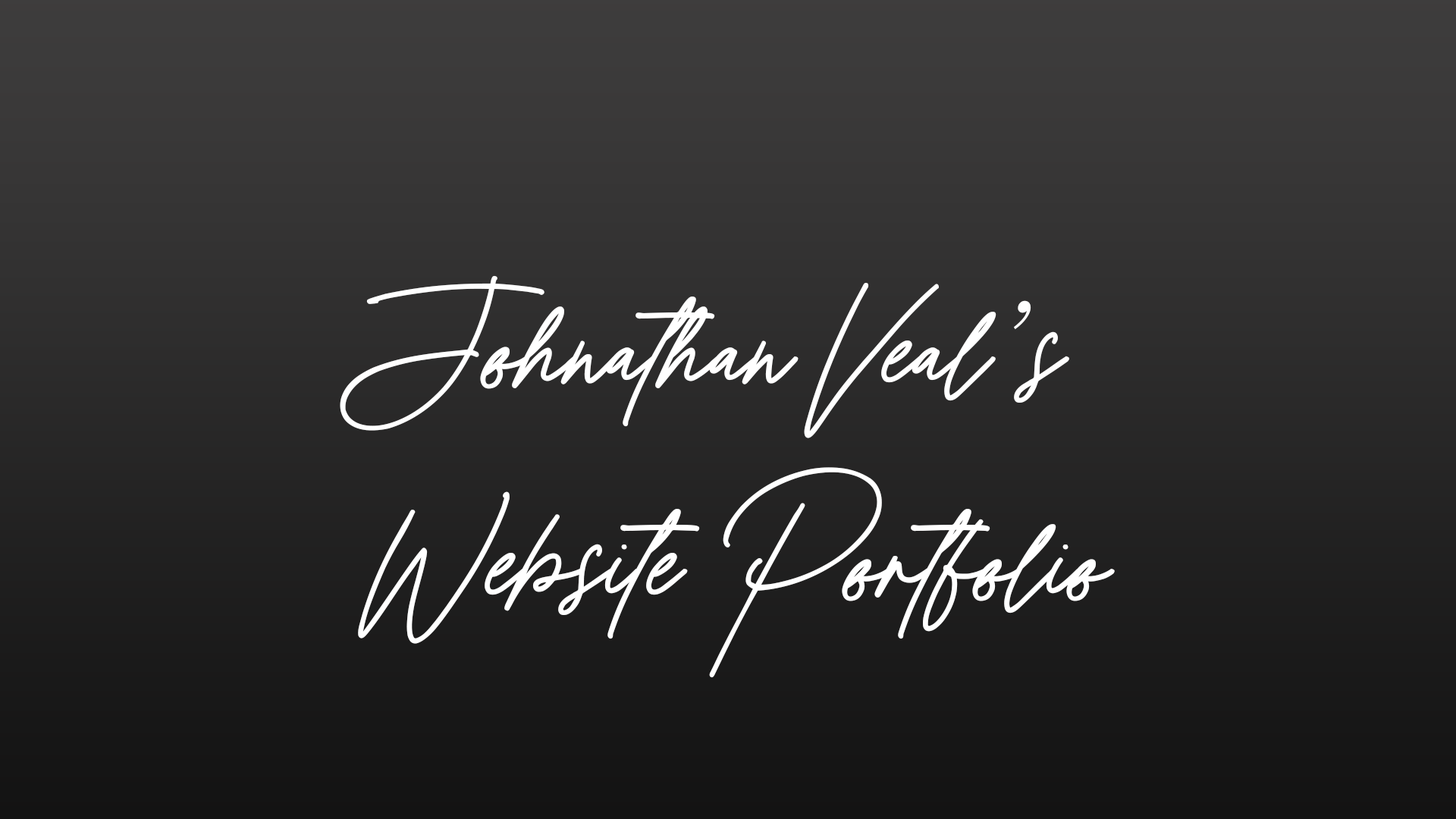
<style>
.page{position:relative;width:1456px;height:819px}
.page>*{position:absolute;margin:0}
.t1{font:227.5px/212.3px "SuarteFree";color:#ffffff}
.t2{font:189.6px/212.3px "SavoyeLetPlain";color:#ffffff}
</style>
<div class="page">
<p class="t1" style="left:340px;top:275px;width:775px;height:403px">Johnathan Veal<span class="t2">’</span>s <br>Website Portfolio</p>
</div>
